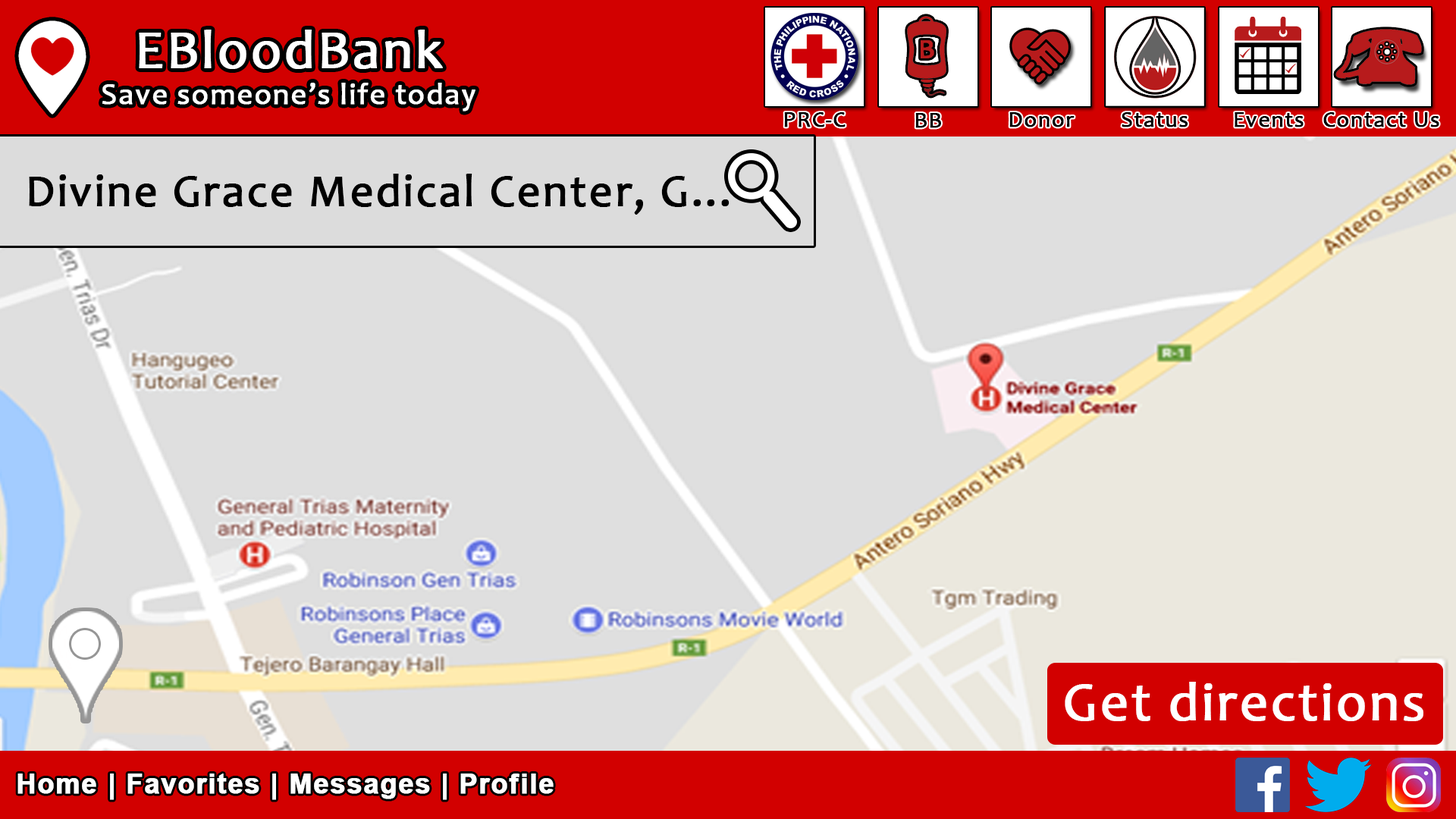
<style>
.page{position:relative;width:1456px;height:819px;background:#dfdfdf}
.page>*{position:absolute;margin:0}
.t1{font:30.3px "Candara";letter-spacing:0.03em;color:#ffffff;font-weight:bold}
.t2{font:54.6px "Candara";letter-spacing:0.03em;color:#ffffff;font-weight:bold}
.t3{font:22.7px "Candara";letter-spacing:0.03em;color:#000000;font-weight:bold}
.t4{font:45.5px "Candara";letter-spacing:0.03em;color:#000000;font-weight:bold}
.t5{font:27.3px "Arial-BoldMT";letter-spacing:0.03em;color:#ffffff;font-weight:bold}
</style>
<div class="page">
<p class="t1" style="left:102px;top:30px;width:373px;height:81px;text-align:center"><span class="t2">EBloodBank<br></span>Save someone’s life today</p>
<p class="t3" style="left:784px;top:112px;width:62px;height:15px">PRC-C</p>
<p class="t3" style="left:915px;top:113px;width:26px;height:15px">BB</p>
<p class="t3" style="left:1009px;top:112px;width:66px;height:15px">Donor</p>
<p class="t3" style="left:1122px;top:112px;width:66px;height:15px">Status</p>
<p class="t3" style="left:1235px;top:112px;width:69px;height:15px">Events</p>
<p class="t3" style="left:1323px;top:112px;width:116px;height:15px">Contact Us</p>
<p class="t4" style="left:29px;top:174px;width:701px;height:41px">Divine Grace Medical Center, G...</p>
<p class="t2" style="left:1065px;top:682px;width:358px;height:39px">Get directions</p>
<p class="t5" style="left:17px;top:773px;width:537px;height:27px">Home | Favorites | Messages | Profile</p>
</div>
